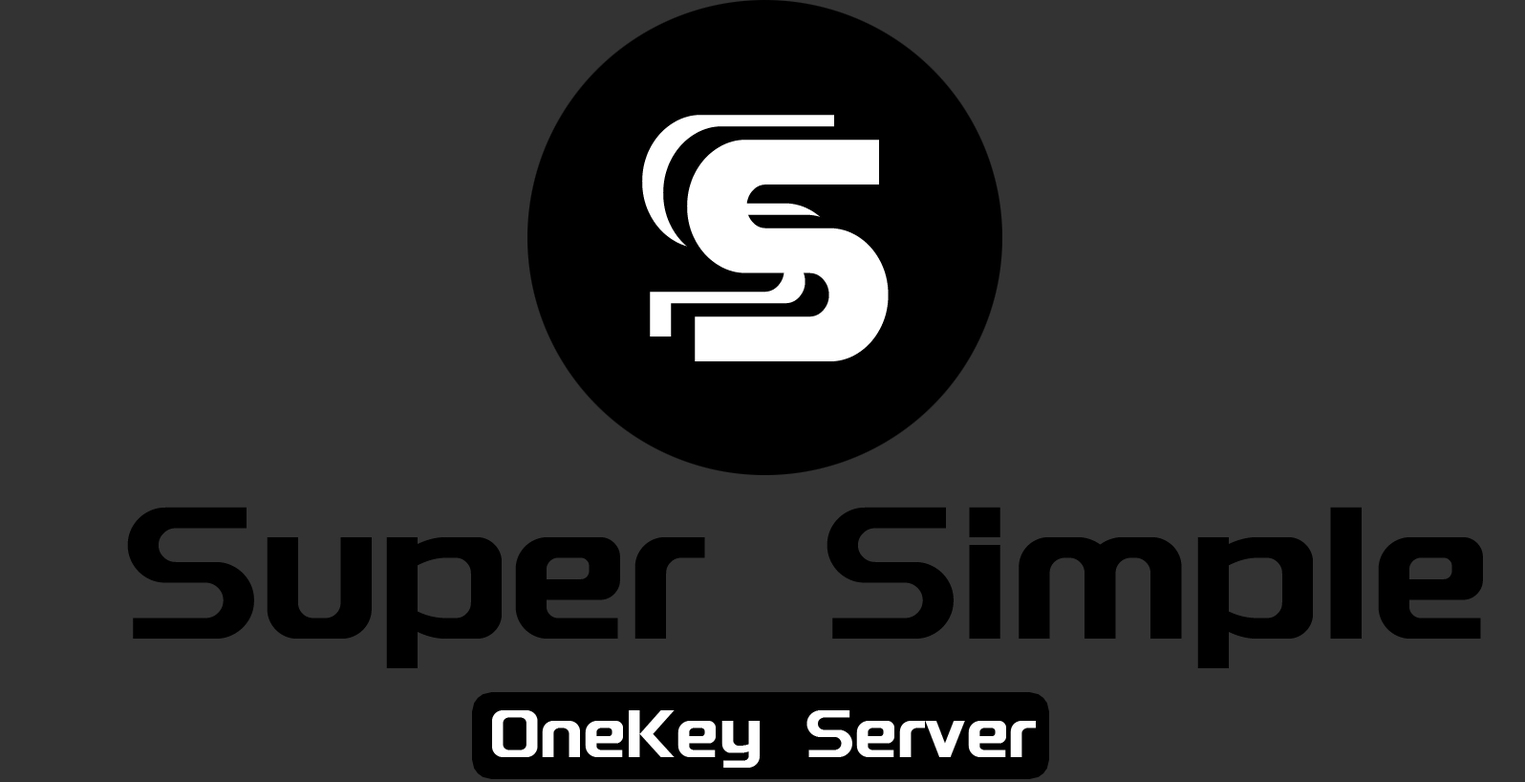
<style>
.page{position:relative;width:1525px;height:782px;background:#333333}
.page>*{position:absolute;margin:0}
.t1{font:417.1px "Fontquan-XinYilogoTi-Regular";color:#ffffff;scale:0.88 1}
.t2{font:191.1px "Fontquan-XinYilogoTi-Regular";color:#000000}
.t3{font:68.8px "Fontquan-XinYilogoTi-Regular";color:#ffffff}
</style>
<div class="page">
<p class="t1" style="left:687px;top:140px;width:202px;height:221px">s</p>
<p class="t2" style="left:127px;top:507px;width:1356px;height:161px">Super Simple</p>
<p class="t3" style="left:492px;top:710px;width:544px;height:57px">OneKey Server</p>
</div>
